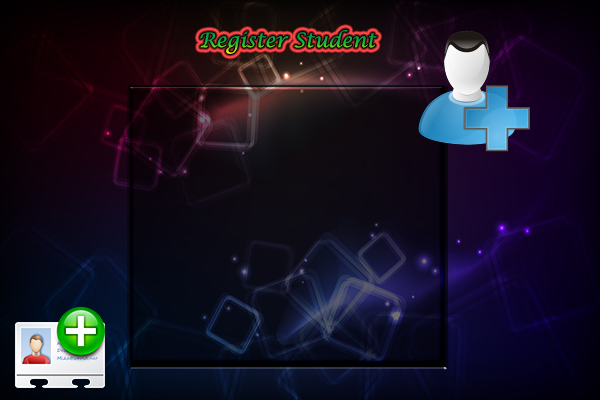
<style>
.page{position:relative;width:600px;height:400px}
.page>*{position:absolute;margin:0}
.t1{font:20px "LucidaCalligraphy-Italic"}
</style>
<div class="page">
<p class="t1" style="left:200px;top:29px;width:177px;height:25px">Register Student</p>
</div>
